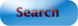
<style>
.page{position:relative;width:78px;height:26px}
.page>*{position:absolute;margin:0}
.t1{font:13px "LucidaGrande-Bold"}
</style>
<div class="page">
<p class="t1" style="left:16px;top:6px;width:43px;height:11px">Search</p>
</div>
